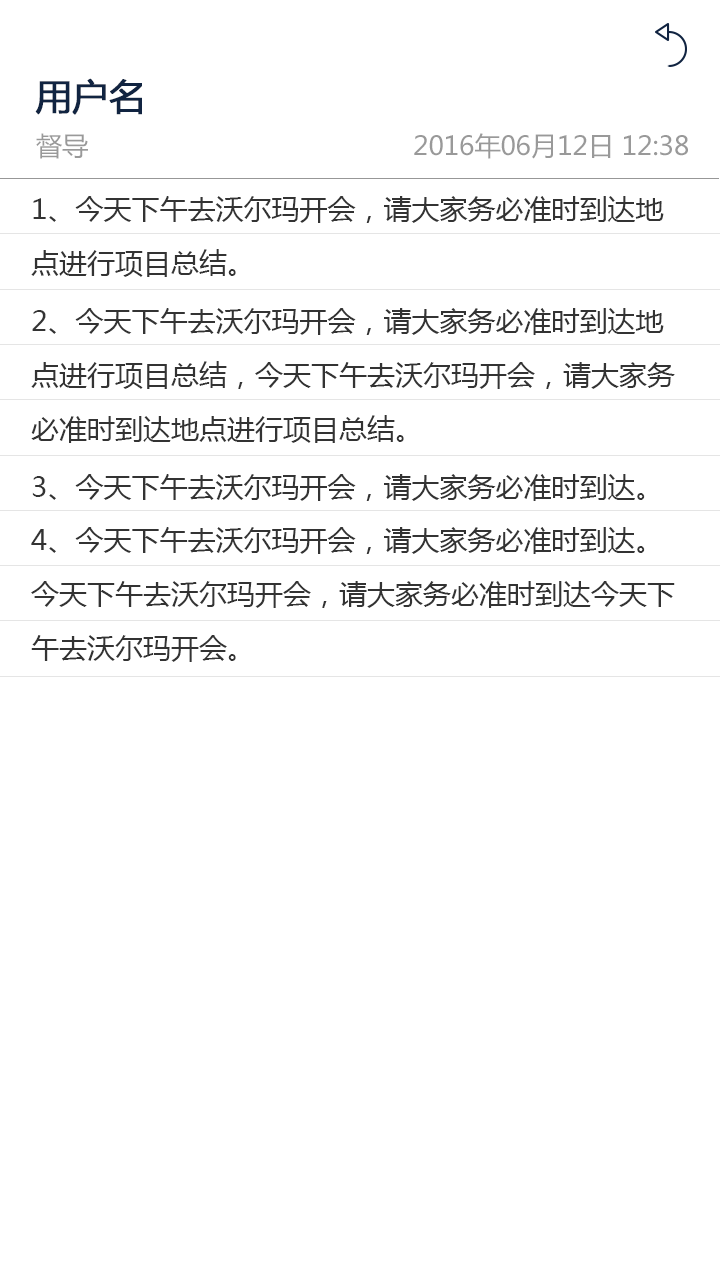
<style>
.page{position:relative;width:720px;height:1280px;background:#ffffff}
.page>*{position:absolute;margin:0}
.t1{font:36px "MicrosoftYaHei";color:#112441;font-weight:bold}
.t2{font:26px "MicrosoftYaHei";color:#999999}
.t3{font:28px/54px "MicrosoftYaHei";color:#333333}
.t4{font:28px "MicrosoftYaHei";color:#333333}
</style>
<div class="page">
<p class="t1" style="left:35px;top:78px;width:107px;height:37px">用户名</p>
<p class="t2" style="left:36px;top:133px;width:52px;height:26px">督导</p>
<p class="t2" style="left:414px;top:133px;width:274px;height:26px">2016年06月12日 12:38</p>
<p class="t3" style="left:31px;top:196px;width:633px;height:81px">1、今天下午去沃尔玛开会，请大家务必准时到达地点进行项目总结。</p>
<p class="t3" style="left:31px;top:308px;width:644px;height:135px">2、今天下午去沃尔玛开会，请大家务必准时到达地点进行项目总结，今天下午去沃尔玛开会，请大家务必准时到达地点进行项目总结。</p>
<p class="t4" style="left:32px;top:474px;width:613px;height:27px">3、今天下午去沃尔玛开会，请大家务必准时到达。</p>
<p class="t3" style="left:31px;top:527px;width:644px;height:135px">4、今天下午去沃尔玛开会，请大家务必准时到达。今天下午去沃尔玛开会，请大家务必准时到达今天下午去沃尔玛开会。</p>
</div>
